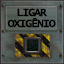
<style>
.page{position:relative;width:64px;height:64px}
.page>*{position:absolute;margin:0}
.t1{font:11px/11px "LucidaConsole";letter-spacing:-0.1em;color:#000000;font-weight:bold}
</style>
<div class="page">
<p class="t1" style="left:7px;top:8px;width:49px;height:20px;text-align:center">LIGAR<br>OXIGÊNIO</p>
</div>
